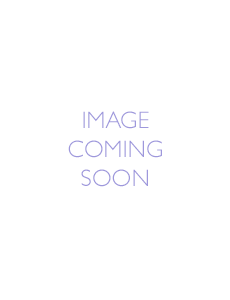
<style>
.page{position:relative;width:230px;height:300px;background:#ffffff}
.page>*{position:absolute;margin:0}
.t1{font:24px "GillSans-Light";color:#9e98dc}
</style>
<div class="page">
<p class="t1" style="left:68px;top:111px;width:94px;height:76px;text-align:center">IMAGE COMING SOON</p>
</div>
